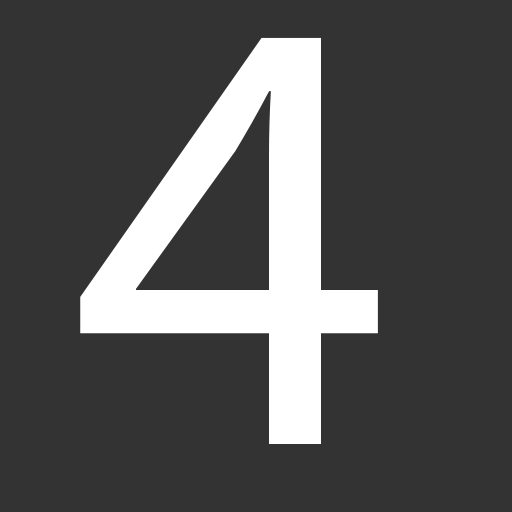
<style>
.page{position:relative;width:512px;height:512px;background:#333333}
.page>*{position:absolute;margin:0}
.t1{font:625px "MyriadPro-Regular";color:#ffffff}
</style>
<div class="page">
<p class="t1" style="left:80px;top:37px;width:298px;height:407px">4</p>
</div>
